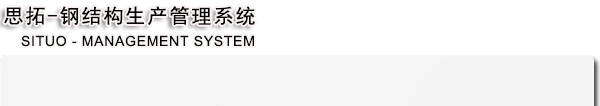
<style>
.page{position:relative;width:600px;height:106px;background:#ffffff}
.page>*{position:absolute;margin:0}
.t1{font:20px "SimHei";letter-spacing:0.1em;color:#050505}
.t2{font:14px "ArialMT";letter-spacing:0.05em;color:#050505}
</style>
<div class="page">
<p class="t1" style="left:4px;top:6px;width:251px;height:20px">思拓-钢结构生产管理系统</p>
<p class="t2" style="left:21px;top:35px;width:233px;height:12px">SITUO - MANAGEMENT SYSTEM</p>
</div>
